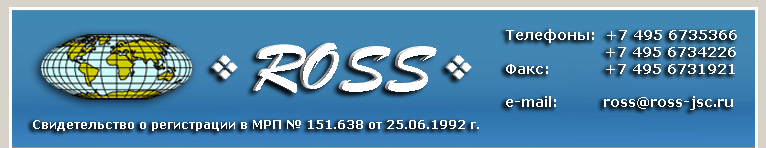
<style>
.page{position:relative;width:766px;height:148px}
.page>*{position:absolute;margin:0}
.t1{font:14px "Verdana-Bold";color:#ffffff}
.t2{font:71.3px "BrushScriptMT";color:#ffffff}
.t3{font:12px "Verdana-Bold";color:#ffffff}
</style>
<div class="page">
<p class="t1" style="left:506px;top:29px;width:231px;height:81px">Телефоны:  +7 495 6735366<br>                    +7 495 6734226<br>Факс:           +7 495 6731921<br><br>e-mail:         ross@ross-jsc.ru</p>
<p class="t2" style="left:253px;top:42px;width:181px;height:51px">ROSS</p>
<p class="t2" style="left:255px;top:43px;width:182px;height:50px">ROSS</p>
<p class="t3" style="left:33px;top:120px;width:446px;height:11px">Свидетельство о регистрации в МРП № 151.638 от 25.06.1992 г.</p>
</div>
